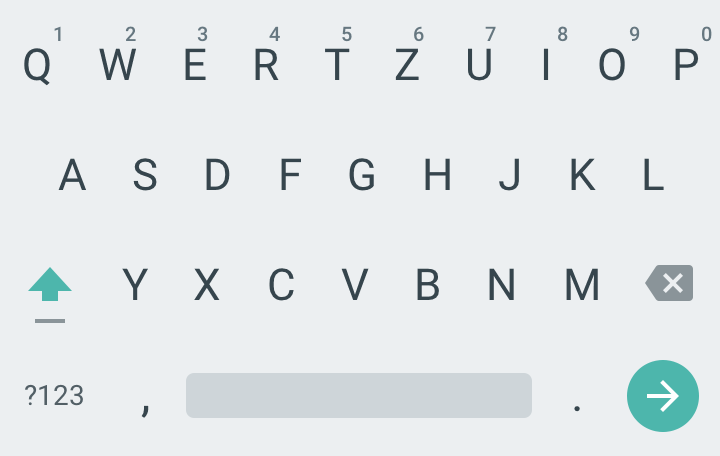
<style>
.page{position:relative;width:720px;height:456px;background:#eceff1}
.page>*{position:absolute;margin:0}
.t1{font:20px "Roboto-Medium";letter-spacing:1.4em;color:#667780;text-transform:uppercase}
.t2{font:44px/110px "Roboto-Regular";letter-spacing:0.39em;color:#36454d;text-transform:uppercase}
.t3{font:28px "Roboto-Regular";color:#525f66;text-transform:uppercase}
.t4{font:48px "Roboto-Regular";letter-spacing:0.31em;color:#36454d;text-transform:uppercase}
</style>
<div class="page">
<p class="t1" style="left:54px;top:26px;width:658px;height:16px">1 2 3 4 5 6 7 8 9 0</p>
<p class="t2" style="left:24px;top:48px;width:675px;height:253px;text-align:center">q w e r t z u i o p<br>a s d f g h j k l<br>y x c v b n m</p>
<p class="t3" style="left:25px;top:384px;width:58px;height:22px">?123</p>
<p class="t4" style="left:141px;top:405px;width:8px;height:13px">,</p>
<p class="t4" style="left:574px;top:406px;width:6px;height:6px">.</p>
</div>
